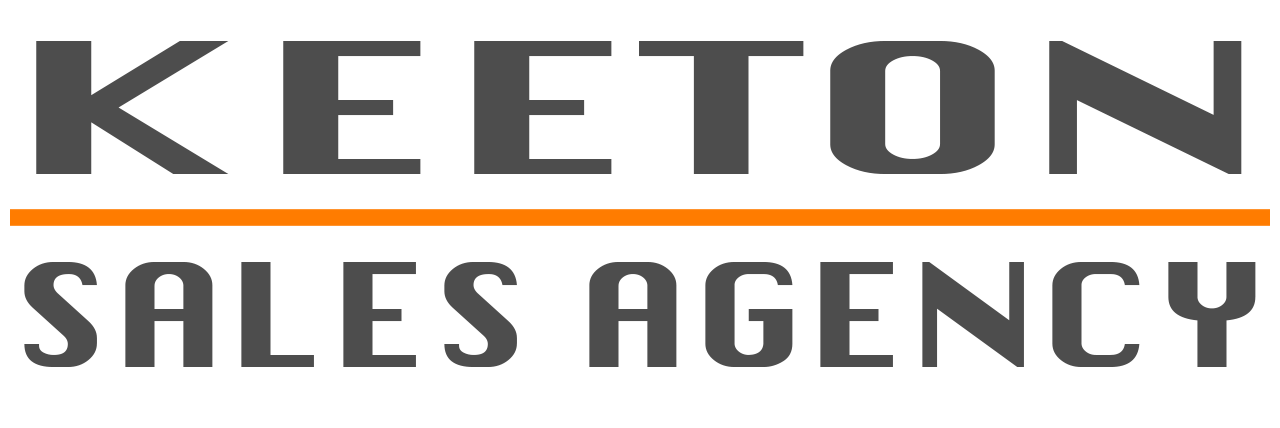
<style>
.page{position:relative;width:1280px;height:428px;background:#ffffff}
.page>*{position:absolute;margin:0}
.t1{font:176.9px "Silom";color:#4d4d4d;scale:1.86 1}
.t2{font:139.5px "Silom";color:#4d4d4d;scale:1.25 1}
</style>
<div class="page">
<p class="t1" style="left:36px;top:41px;width:1206px;height:133px">KEETON</p>
<p class="t2" style="left:24px;top:262px;width:1232px;height:105px">SALES AGENCY</p>
</div>
